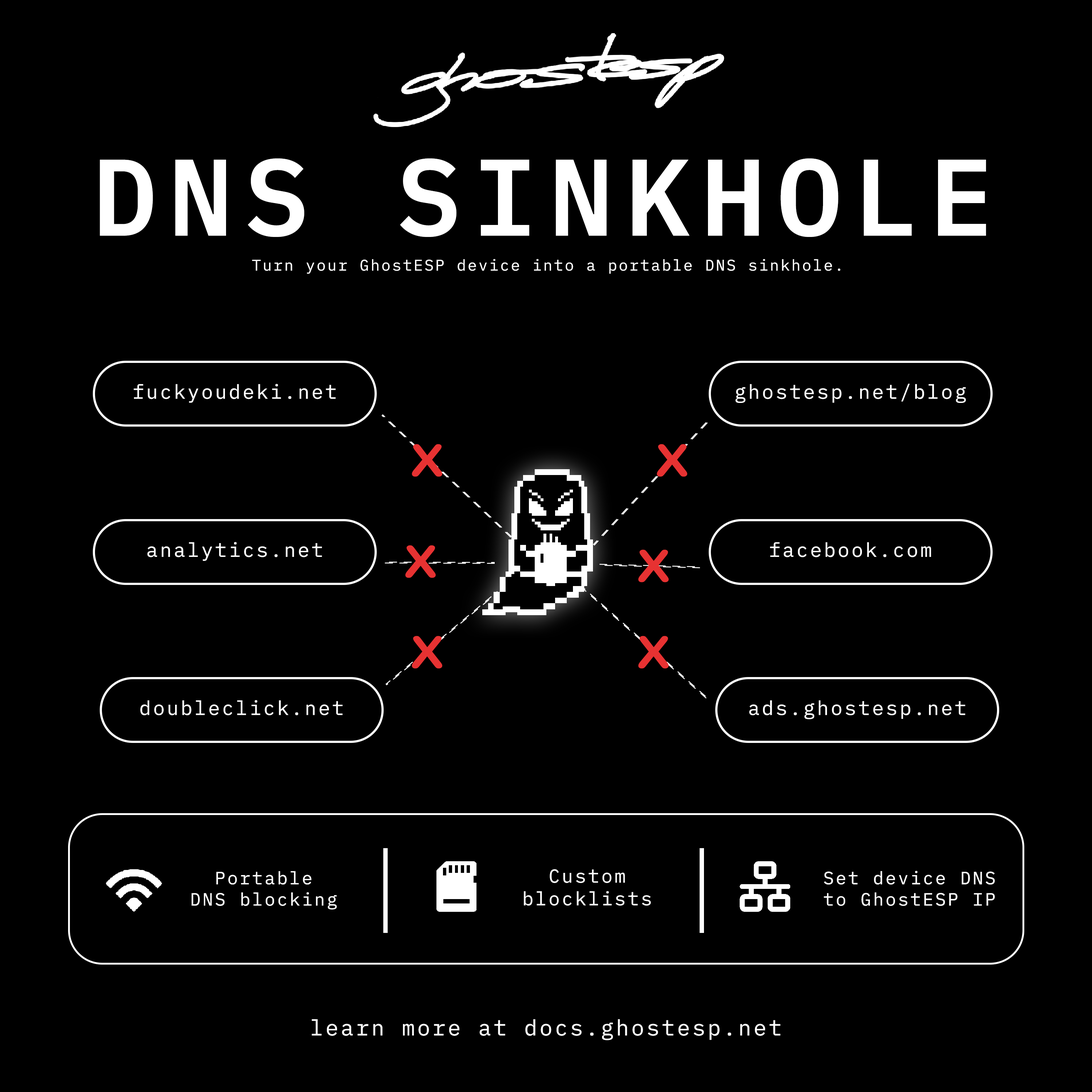
<style>
.page{position:relative;width:1092px;height:1092px;background:#000000}
.page>*{position:absolute;margin:0}
.t1{font:108.7px "IBMPlexMono-SemiBold";letter-spacing:0.1em;color:#ffffff}
.t2{font:15.4px "IBMPlexMono-Regular";letter-spacing:0.1em;color:#ffffff}
.t3{font:19.7px "IBMPlexMono-Regular";letter-spacing:0.1em;color:#ffffff}
.t4{font:43.7px "ArialRoundedMTBold";letter-spacing:0.1em;color:#e73232;scale:1.22 1}
.t5{font:18.8px "IBMPlexMono-Regular";letter-spacing:0.1em;color:#ffffff}
.t6{font:17.8px "IBMPlexMono-Regular";letter-spacing:0.1em;color:#ffffff}
.t7{font:21.8px "IBMPlexMono-Regular";letter-spacing:0.1em;color:#ffffff}
</style>
<div class="page">
<p class="t1" style="left:100px;top:158px;width:886px;height:79px">DNS SINKHOLE</p>
<p class="t2" style="left:252px;top:259px;width:588px;height:15px">Turn your GhostESP device into a portable DNS sinkhole.</p>
<p class="t3" style="left:134px;top:384px;width:202px;height:19px">fuckyoudeki.net</p>
<p class="t3" style="left:735px;top:384px;width:231px;height:19px">ghostesp.net/blog</p>
<p class="t4" style="left:412px;top:444px;width:30px;height:33px">X</p>
<p class="t4" style="left:657px;top:444px;width:30px;height:33px">X</p>
<p class="t3" style="left:147px;top:542px;width:175px;height:19px">analytics.net</p>
<p class="t4" style="left:405px;top:545px;width:31px;height:33px">X</p>
<p class="t3" style="left:770px;top:542px;width:161px;height:15px">facebook.com</p>
<p class="t4" style="left:638px;top:550px;width:31px;height:32px">X</p>
<p class="t4" style="left:412px;top:636px;width:30px;height:33px">X</p>
<p class="t4" style="left:638px;top:636px;width:31px;height:33px">X</p>
<p class="t3" style="left:140px;top:700px;width:203px;height:15px">doubleclick.net</p>
<p class="t3" style="left:749px;top:700px;width:216px;height:19px">ads.ghostesp.net</p>
<p class="t5" style="left:524px;top:869px;width:127px;height:37px;text-align:center">Custom<br>blocklists</p>
<p class="t6" style="left:191px;top:871px;width:146px;height:39px;text-align:center">Portable<br>DNS blocking</p>
<p class="t6" style="left:824px;top:871px;width:171px;height:35px;text-align:center">Set device DNS<br>to GhostESP IP</p>
<p class="t7" style="left:312px;top:1019px;width:468px;height:21px">learn more at docs.ghostesp.net</p>
</div>
